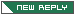
<style>
.page{position:relative;width:75px;height:15px;background:#227751}
.page>*{position:absolute;margin:0}
.t1{font:8px "BitDustTwo";color:#ffffff}
</style>
<div class="page">
<p class="t1" style="left:17px;top:5px;width:50px;height:5px">NEW REPLY</p>
</div>
